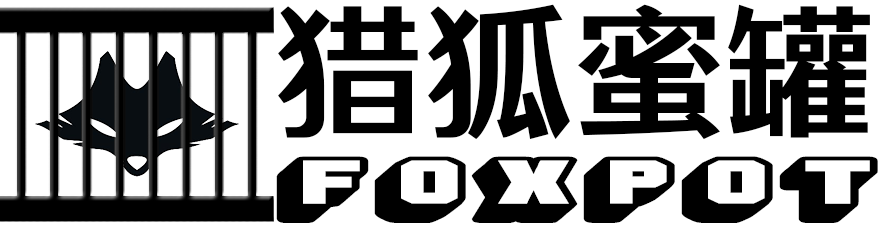
<style>
.page{position:relative;width:880px;height:227px;background:#ffffff}
.page>*{position:absolute;margin:0}
.t1{font:150px "TCYXHLOGOMH--GB1-0";color:#000000}
.t2{font:44px "DeepShadow";color:#000000;scale:2.09 1}
</style>
<div class="page">
<p class="t1" style="left:278px;top:4px;width:592px;height:136px">猎狐蜜罐</p>
<p class="t2" style="left:276px;top:156px;width:602px;height:67px">FOXPOT</p>
</div>
